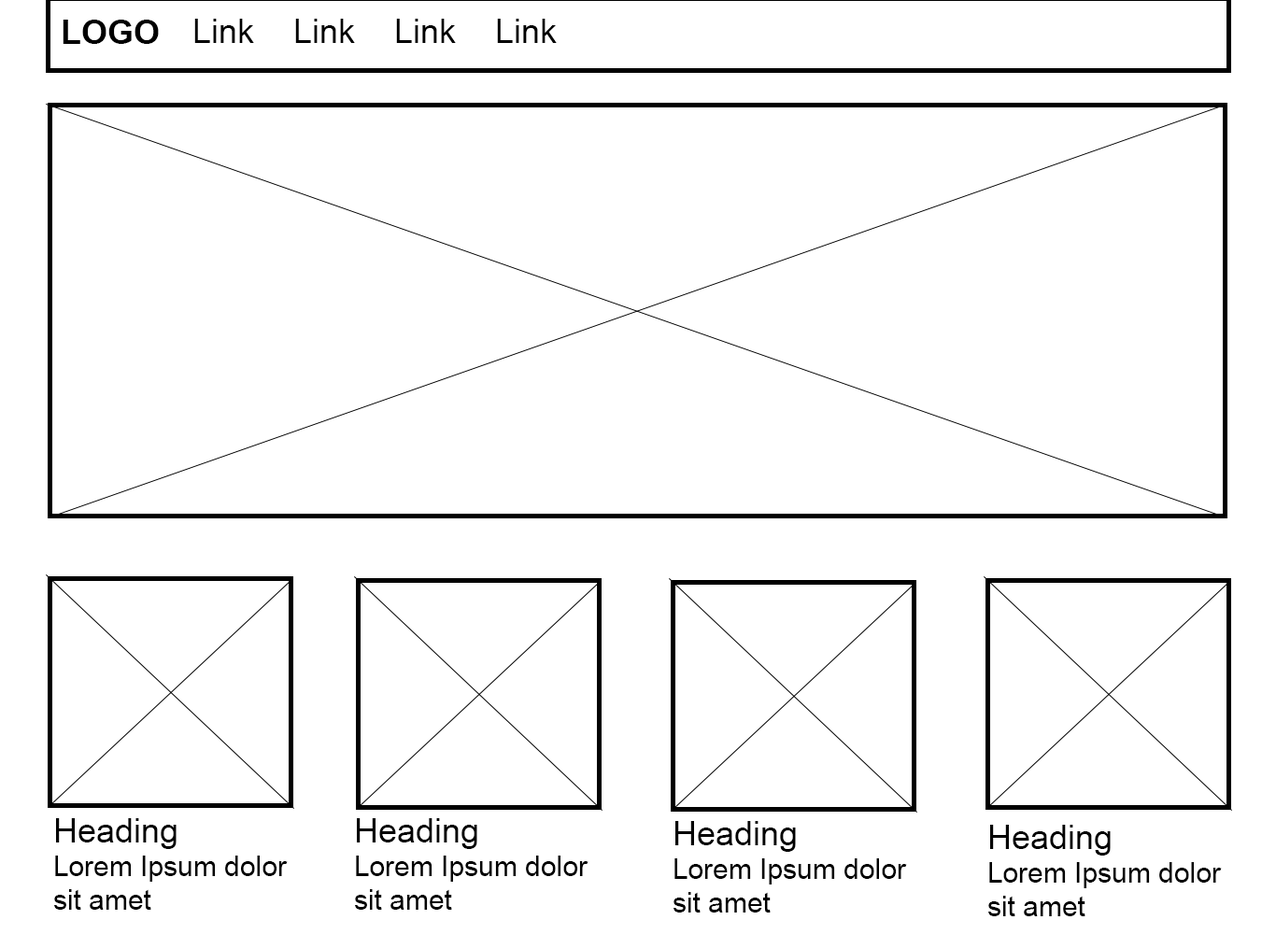
<style>
.page{position:relative;width:1276px;height:934px;background:#ffffff}
.page>*{position:absolute;margin:0}
.t1{font:33.6px "Arial-BoldMT";color:#000000}
.t2{font:33.6px "ArialMT";color:#000000}
.t3{font:28px "ArialMT";color:#000000}
</style>
<div class="page">
<p class="t1" style="left:63px;top:20px;width:96px;height:24px">LOGO</p>
<p class="t2" style="left:194px;top:19px;width:363px;height:24px">Link  Link  Link  Link</p>
<p class="t3" style="left:54px;top:818px;width:234px;height:92px"><span class="t2">Heading</span><br>Lorem Ipsum dolor sit amet</p>
<p class="t3" style="left:355px;top:818px;width:234px;height:92px"><span class="t2">Heading</span><br>Lorem Ipsum dolor sit amet</p>
<p class="t3" style="left:674px;top:821px;width:233px;height:92px"><span class="t2">Heading</span><br>Lorem Ipsum dolor sit amet</p>
<p class="t3" style="left:989px;top:825px;width:233px;height:92px"><span class="t2">Heading</span><br>Lorem Ipsum dolor sit amet</p>
</div>
